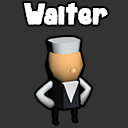
<style>
.page{position:relative;width:128px;height:128px;background:#333333}
.page>*{position:absolute;margin:0}
.t1{font:30px "SPIDERMONKEY";color:#ffffff;font-weight:bold}
</style>
<div class="page">
<p class="t1" style="left:24px;top:3px;width:84px;height:22px">Waiter</p>
</div>
